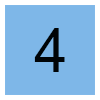
<style>
.page{position:relative;width:100px;height:100px;background:#7eb7e8}
.page>*{position:absolute;margin:0}
.t1{font:60px "MicrosoftSansSerif";color:#000407}
</style>
<div class="page">
<p class="t1" style="left:34px;top:28px;width:31px;height:44px">4</p>
</div>
